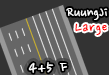
<style>
.page{position:relative;width:109px;height:75px;background:#333333}
.page>*{position:absolute;margin:0}
.t1{font:16px "NanumPen";color:#ffffff}
.t2{font:16px "NanumPen";letter-spacing:0.05em;color:#ff0000}
.t3{font:18px "NanumPen";letter-spacing:0.05em;color:#ffffff}
</style>
<div class="page">
<p class="t1" style="left:66px;top:8px;width:42px;height:12px">RuungJi</p>
<p class="t2" style="left:75px;top:23px;width:32px;height:12px">Large</p>
<p class="t3" style="left:28px;top:62px;width:39px;height:11px">4+5 F</p>
</div>
